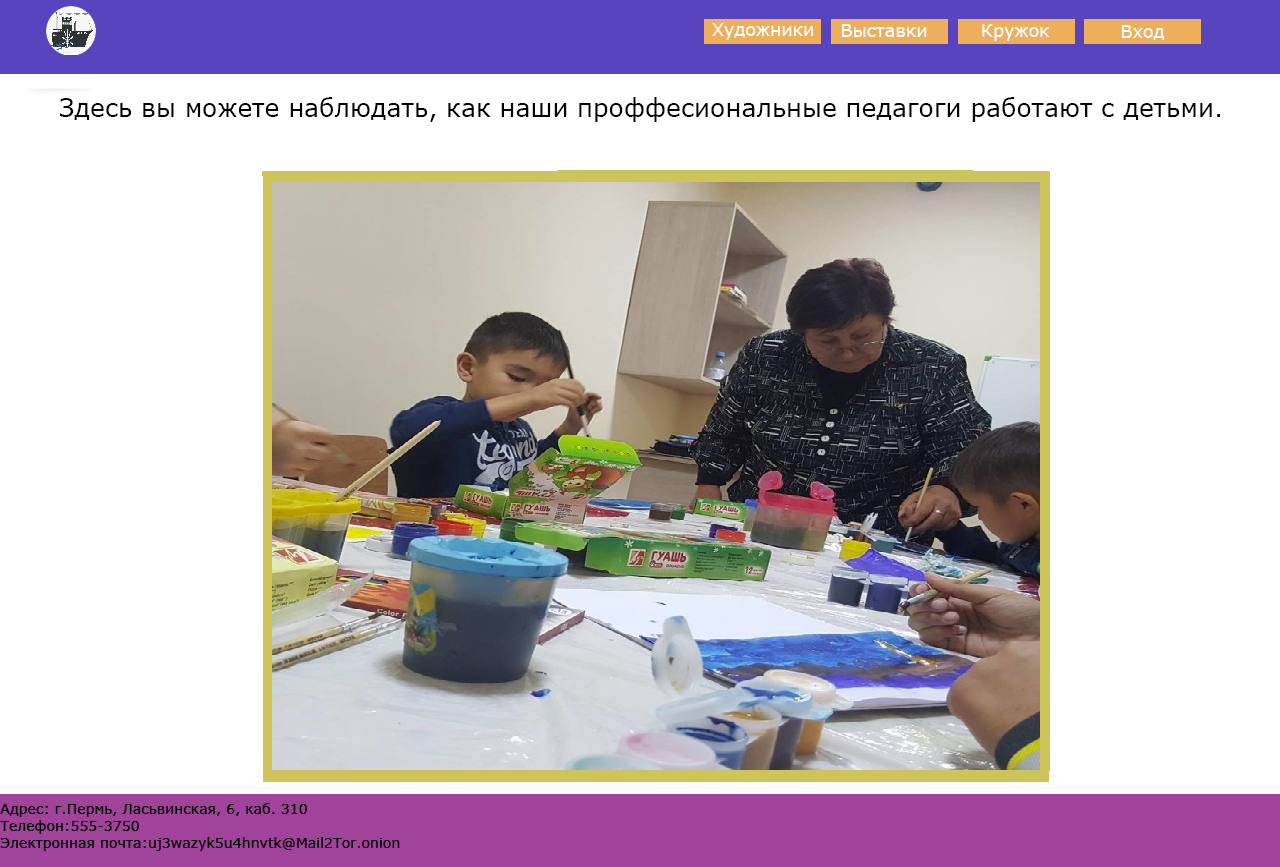
<style>
.page{position:relative;width:1280px;height:867px;background:#ffffff}
.page>*{position:absolute;margin:0}
.t1{font:17.6px "Verdana";color:#fefefe}
.t2{font:25px "Verdana";color:#000000}
.t3{font:14.1px "Verdana";color:#000000}
</style>
<div class="page">
<p class="t1" style="left:712px;top:23px;width:101px;height:17px">Художники</p>
<p class="t1" style="left:841px;top:24px;width:86px;height:13px">Выставки</p>
<p class="t1" style="left:982px;top:24px;width:68px;height:17px">Кружок</p>
<p class="t1" style="left:1121px;top:25px;width:44px;height:15px">Вход</p>
<p class="t2" style="left:60px;top:97px;width:1160px;height:25px">Здесь вы можете наблюдать, как наши проффесиональные педагоги работают с детьми.</p>
<p class="t3" style="left:0px;top:803px;width:400px;height:48px">Адрес: г.Пермь, Ласьвинская, 6, каб. 310<br>Телефон:555-3750<br>Электронная почта:uj3wazyk5u4hnvtk@Mail2Tor.onion</p>
</div>
